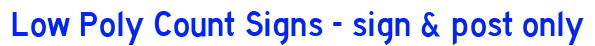
<style>
.page{position:relative;width:595px;height:46px;background:#ffffff}
.page>*{position:absolute;margin:0}
.t1{font:36px "HighwayGothic";color:#0124fb}
</style>
<div class="page">
<p class="t1" style="left:12px;top:11px;width:572px;height:34px">Low Poly Count Signs - sign &amp; post only</p>
</div>
